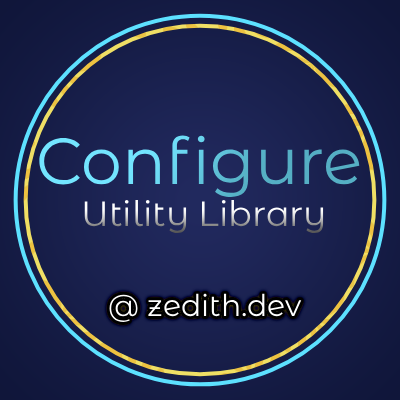
<style>
.page{position:relative;width:400px;height:400px}
.page>*{position:absolute;margin:0}
.t1{font:65px "MontserratAlternates-Regular"}
.t2{font:35px "MontserratAlternates-Regular"}
.t3{font:30px "MontserratAlternates-Regular";color:#ffffff}
</style>
<div class="page">
<p class="t1" style="left:39px;top:135px;width:321px;height:62px">Configure</p>
<p class="t2" style="left:84px;top:200px;width:240px;height:33px">Utility Library</p>
<p class="t3" style="left:109px;top:293px;width:193px;height:29px">@ zedith.dev</p>
</div>
